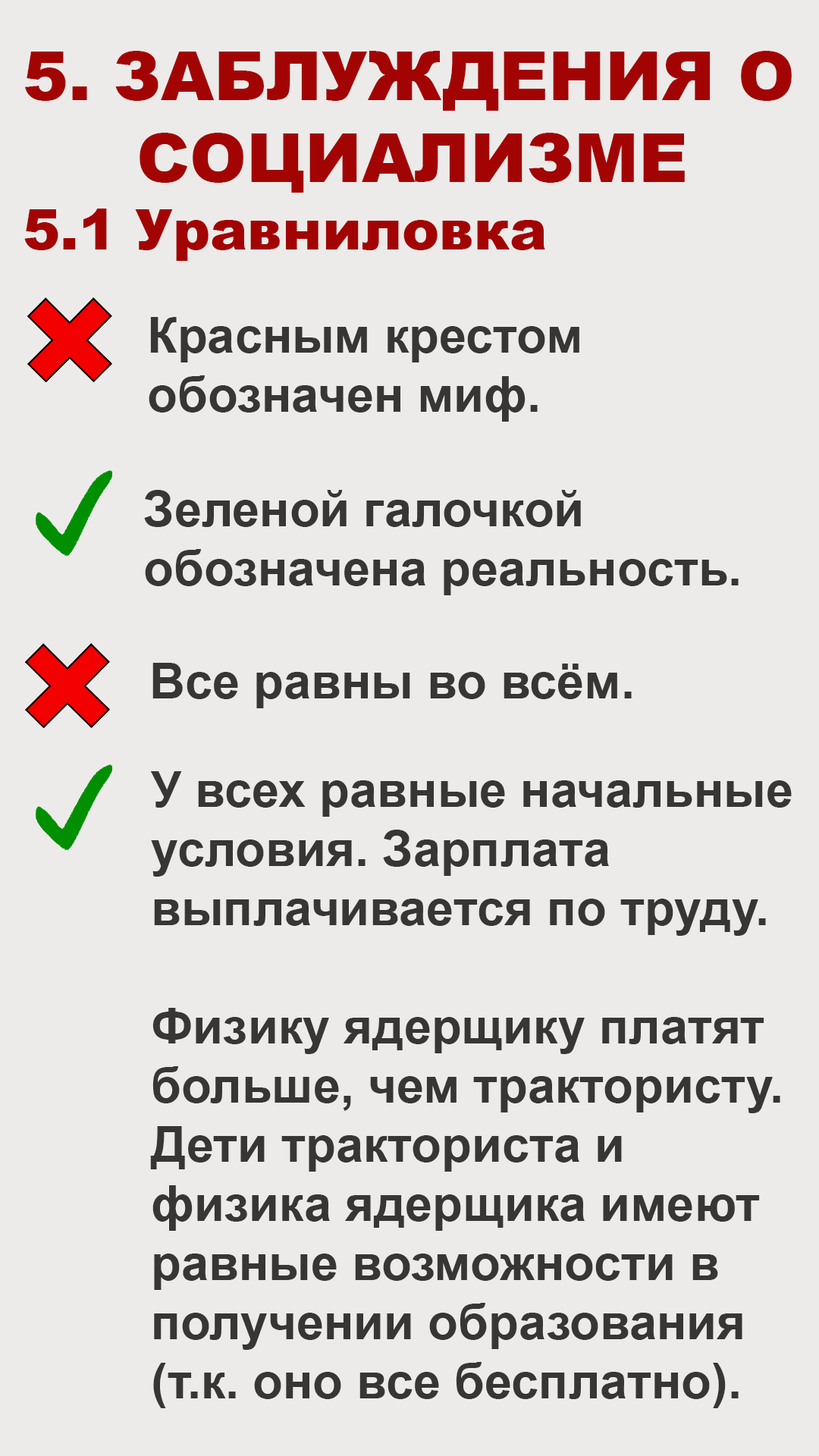
<style>
.page{position:relative;width:819px;height:1456px;background:#ecebe9}
.page>*{position:absolute;margin:0}
.t1{font:68.2px "Arial-Black";color:#a20403}
.t2{font:56.1px "Arial-Black";color:#a20403}
.t3{font:49.3px "Arial-BoldMT";color:#373634}
</style>
<div class="page">
<p class="t1" style="left:24px;top:51px;width:768px;height:210px">5. ЗАБЛУЖДЕНИЯ О <br>     СОЦИАЛИЗМЕ<br><span class="t2">5.1 Уравниловка</span></p>
<p class="t3" style="left:149px;top:317px;width:430px;height:105px">Красным крестом<br>обозначен миф.</p>
<p class="t3" style="left:144px;top:490px;width:595px;height:105px">Зеленой галочкой<br>обозначена реальность.</p>
<p class="t3" style="left:152px;top:663px;width:480px;height:45px">Все равны во всём.</p>
<p class="t3" style="left:150px;top:771px;width:642px;height:637px">У всех равные начальные<br>условия. Зарплата <br>выплачивается по труду.<br><br>Физику ядерщику платят<br>больше, чем трактористу.<br>Дети тракториста и<br>физика ядерщика имеют<br>равные возможности в <br>получении образования<br>(т.к. оно все бесплатно).</p>
</div>
